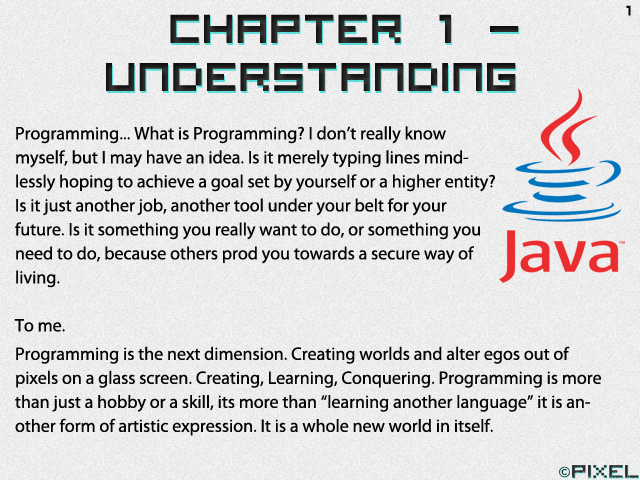
<style>
.page{position:relative;width:640px;height:480px}
.page>*{position:absolute;margin:0}
.t1{font:24px "VisitorTT2BRK";color:#050505}
.t2{font:72px/24px "VisitorTT2BRK";color:#1f1d1d}
.t3{font:18px/24px "MyriadPro-Regular";color:#050505}
</style>
<div class="page">
<p class="t1" style="left:626px;top:5px;width:5px;height:11px">1</p>
<p class="t2" style="left:106px;top:14px;width:413px;height:77px;text-align:center">chapter 1 - <br><br>Understanding</p>
<p class="t3" style="left:14px;top:126px;width:481px;height:206px">Programming... What is Programming? I don’t really know myself, but I may have an idea. Is it merely typing lines mindlessly hoping to achieve a goal set by yourself or a higher entity? Is it just another job, another tool under your belt for your future. Is it something you really want to do, or something you need to do, because others prod you towards a secure way of living.<br><br>To me.</p>
<p class="t3" style="left:15px;top:346px;width:586px;height:90px">Programming is the next dimension. Creating worlds and alter egos out of pixels on a glass screen. Creating, Learning, Conquering. Programming is more than just a hobby or a skill, its more than “learning another language” it is another form of artistic expression. It is a whole new world in itself.</p>
</div>
